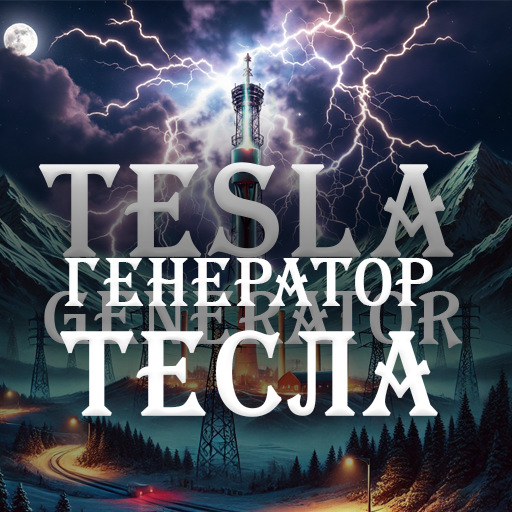
<style>
.page{position:relative;width:512px;height:512px}
.page>*{position:absolute;margin:0}
.t1{font:126px "AAlgeriusNr";letter-spacing:0.05em;font-variant:small-caps;font-weight:bold}
.t2{font:64.8px "AAlgeriusNr";letter-spacing:0.05em;color:#ffffff;font-variant:small-caps;font-weight:bold}
.t3{font:72px "AAlgeriusNr";letter-spacing:0.05em;color:#8e8e8e;font-variant:small-caps;font-weight:bold}
.t4{font:113.4px "AAlgeriusNr";letter-spacing:0.05em;color:#ffffff;font-variant:small-caps;font-weight:bold}
</style>
<div class="page">
<p class="t1" style="left:38px;top:162px;width:416px;height:96px">TESLA</p>
<p class="t2" style="left:64px;top:258px;width:369px;height:48px">ГЕНЕРАТОР</p>
<p class="t3" style="left:44px;top:291px;width:418px;height:57px">GENERATOR</p>
<p class="t4" style="left:60px;top:330px;width:378px;height:87px">ТЕСЛА</p>
</div>
